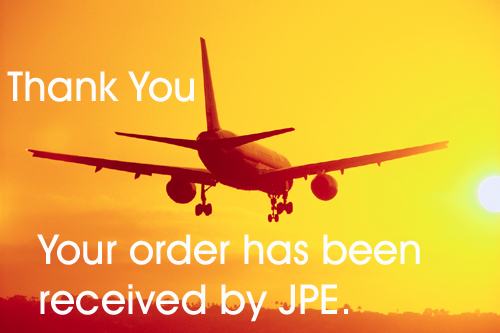
<style>
.page{position:relative;width:500px;height:333px}
.page>*{position:absolute;margin:0}
.t1{font:41.7px "AvantGardeITCbyBT-Medium";color:#fcfcfc}
</style>
<div class="page">
<p class="t1" style="left:7px;top:71px;width:187px;height:31px">Thank You</p>
<p class="t1" style="left:37px;top:234px;width:383px;height:88px">Your order has been <br>received by JPE.</p>
</div>
